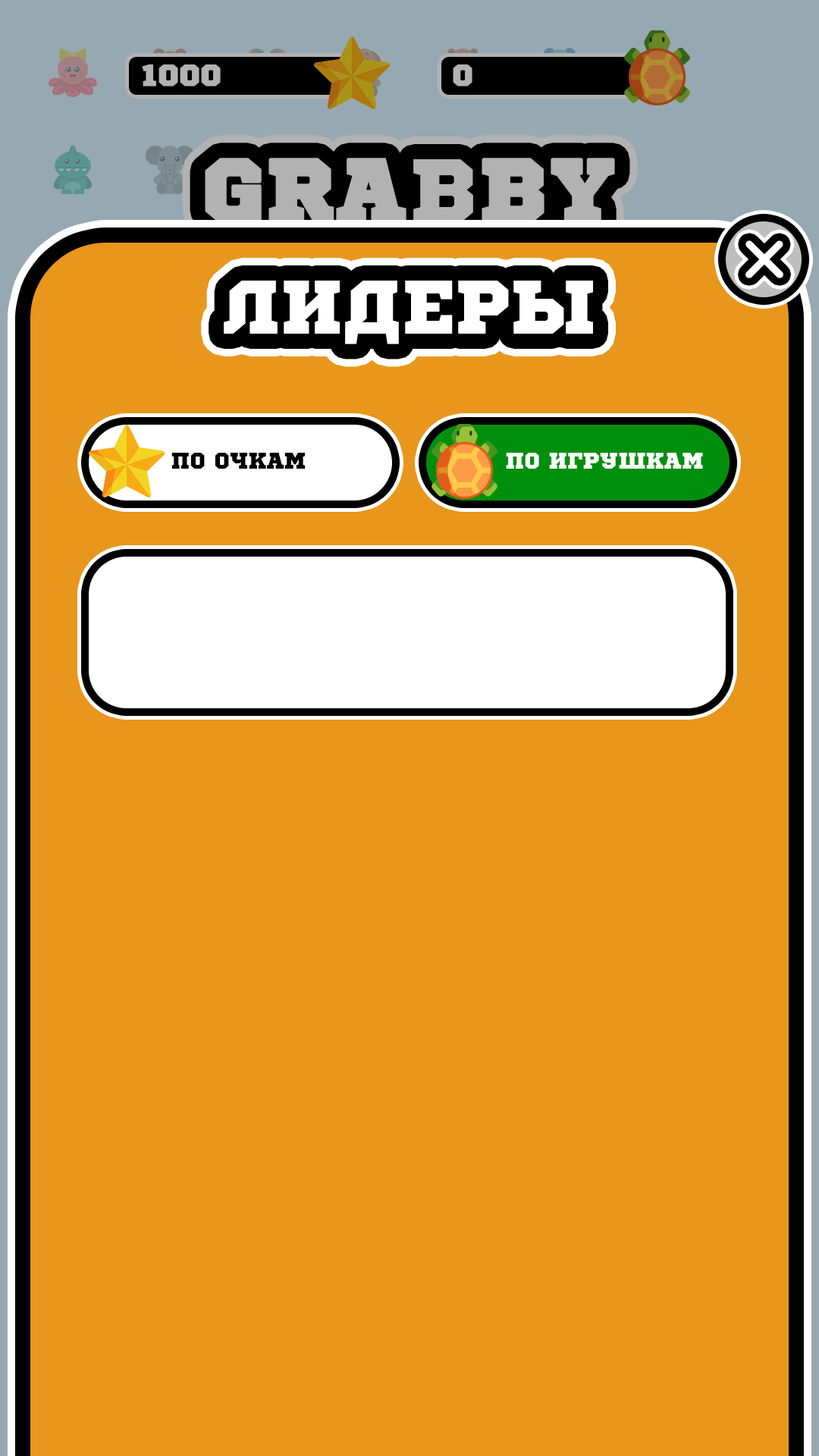
<style>
.page{position:relative;width:819px;height:1456px;background:#e9961c}
.page>*{position:absolute;margin:0}
.t1{font:75.8px "SportsWorld";color:#ffffff;text-transform:uppercase}
.t2{font:22.7px "SportsWorld";color:#000000;text-transform:uppercase}
.t3{font:22.7px "SportsWorld";color:#ffffff;text-transform:uppercase}
</style>
<div class="page">
<p class="t1" style="left:224px;top:281px;width:369px;height:63px">лидеры</p>
<p class="t2" style="left:171px;top:453px;width:134px;height:16px">по очкам</p>
<p class="t3" style="left:506px;top:453px;width:197px;height:16px">по игрушкам</p>
</div>
